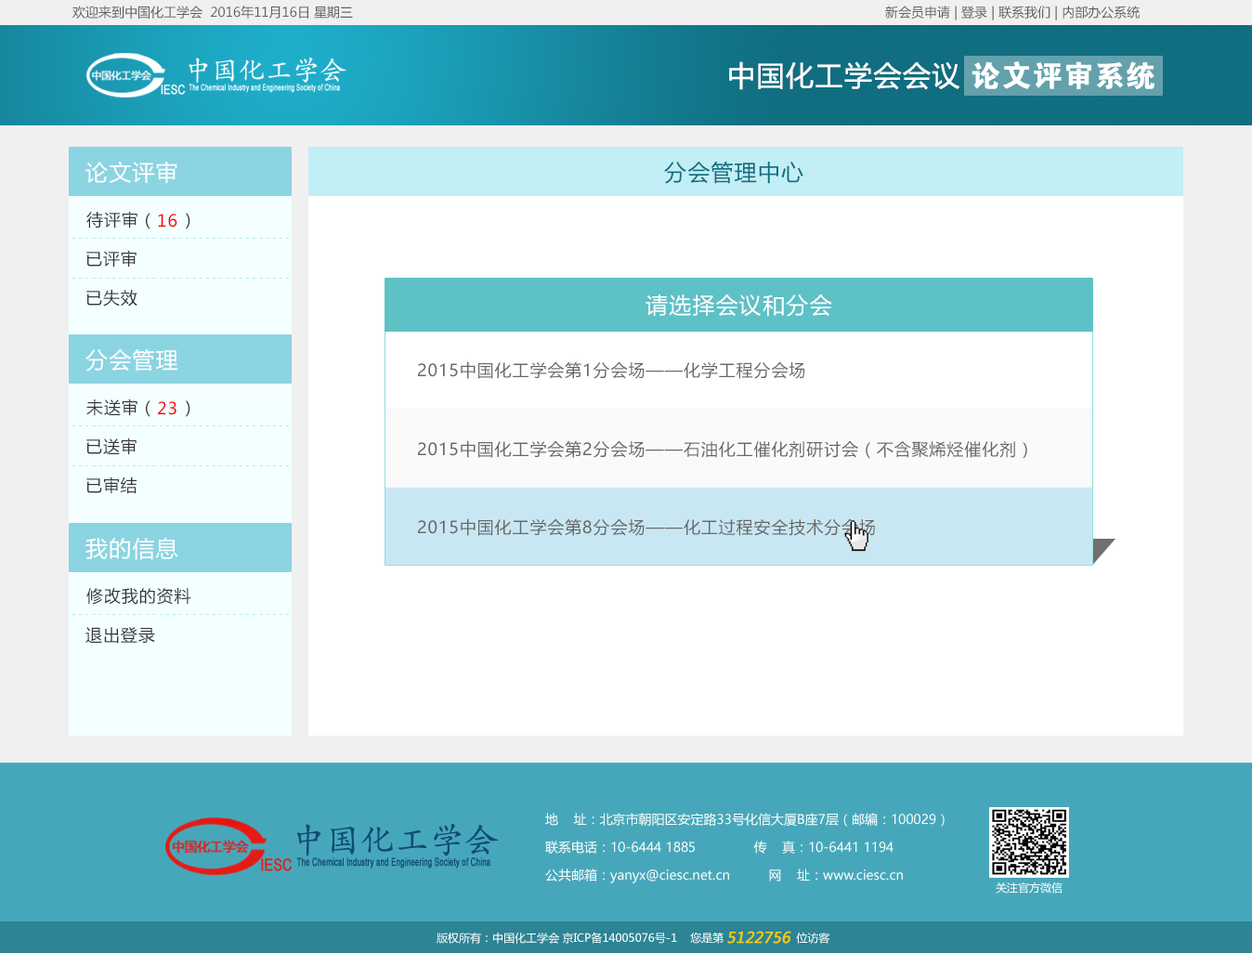
<style>
.page{position:relative;width:1252px;height:953px;background:#ffffff}
.page>*{position:absolute;margin:0}
.t1{font:13px "MicrosoftYaHei";color:#5d5e5e}
.t2{font:27.9px "MicrosoftYaHei";letter-spacing:0.05em;color:#ffffff}
.t3{font:29.6px "FZDHTJW--GB1-0";letter-spacing:0.05em;color:#ffffff}
.t4{font:22.3px "MicrosoftYaHei";letter-spacing:0.05em;color:#ffffff}
.t5{font:22.3px "MicrosoftYaHei";letter-spacing:0.05em;color:#116e80}
.t6{font:16.7px "MicrosoftYaHei";letter-spacing:0.05em;color:#363636}
.t7{font:16.7px "MicrosoftYaHei";letter-spacing:0.05em;color:#ff0000}
.t8{font:7.4px "SimSun";letter-spacing:0.4em;color:#b2e9f4}
.t9{font:16.7px "MicrosoftYaHei";letter-spacing:0.05em;color:#676767}
.t10{font:13px/27.9px "MicrosoftYaHei";color:#f4ffff}
.t11{font:11.1px "MicrosoftYaHei";color:#f4ffff}
.t12{font:14.9px "MicrosoftYaHei";color:#ffcc00;font-weight:bold;font-style:italic}
</style>
<div class="page">
<p class="t1" style="left:72px;top:6px;width:281px;height:13px">欢迎来到中国化工学会  2016年11月16日 星期三</p>
<p class="t1" style="left:885px;top:6px;width:254px;height:14px">新会员申请 | 登录 | 联系我们 | 内部办公系统</p>
<p class="t2" style="left:729px;top:61px;width:230px;height:29px">中国化工学会会议</p>
<p class="t3" style="left:971px;top:61px;width:183px;height:29px">论文评审系统</p>
<p class="t4" style="left:85px;top:161px;width:92px;height:23px">论文评审</p>
<p class="t5" style="left:664px;top:162px;width:139px;height:22px">分会管理中心</p>
<p class="t6" style="left:86px;top:211px;width:104px;height:18px">待评审（    ）</p>
<p class="t7" style="left:158px;top:214px;width:19px;height:13px">16</p>
<p class="t8" style="left:72px;top:238px;width:217px;height:1px">---------------------------------</p>
<p class="t6" style="left:86px;top:250px;width:50px;height:17px">已评审</p>
<p class="t8" style="left:72px;top:278px;width:217px;height:1px">---------------------------------</p>
<p class="t6" style="left:86px;top:290px;width:51px;height:16px">已失效</p>
<p class="t4" style="left:645px;top:294px;width:187px;height:23px">请选择会议和分会</p>
<p class="t4" style="left:85px;top:349px;width:93px;height:22px">分会管理</p>
<p class="t9" style="left:418px;top:361px;width:387px;height:18px">2015中国化工学会第1分会场——化学工程分会场</p>
<p class="t6" style="left:86px;top:398px;width:104px;height:19px">未送审（    ）</p>
<p class="t7" style="left:158px;top:401px;width:18px;height:14px">23</p>
<p class="t8" style="left:72px;top:425px;width:217px;height:1px">---------------------------------</p>
<p class="t6" style="left:86px;top:437px;width:50px;height:18px">已送审</p>
<p class="t9" style="left:418px;top:440px;width:609px;height:19px">2015中国化工学会第2分会场——石油化工催化剂研讨会（不含聚烯烃催化剂）</p>
<p class="t8" style="left:72px;top:465px;width:217px;height:1px">---------------------------------</p>
<p class="t6" style="left:86px;top:476px;width:51px;height:18px">已审结</p>
<p class="t9" style="left:418px;top:518px;width:457px;height:18px">2015中国化工学会第8分会场——化工过程安全技术分会场</p>
<p class="t4" style="left:85px;top:537px;width:93px;height:23px">我的信息</p>
<p class="t6" style="left:86px;top:588px;width:105px;height:16px">修改我的资料</p>
<p class="t8" style="left:72px;top:614px;width:217px;height:1px">---------------------------------</p>
<p class="t6" style="left:85px;top:627px;width:70px;height:16px">退出登录</p>
<p class="t10" style="left:545px;top:812px;width:399px;height:71px">地    址：北京市朝阳区安定路33号化信大厦B座7层（邮编：100029）<br>联系电话：10-6444 1885               传    真：10-6441 1194<br>公共邮箱：yanyx@ciesc.net.cn          网    址：www.ciesc.cn</p>
<p class="t11" style="left:995px;top:882px;width:67px;height:11px">关注官方微信</p>
<p class="t11" style="left:436px;top:931px;width:394px;height:12px">版权所有：中国化工学会 京ICP备14005076号-1    您是第                      位访客</p>
<p class="t12" style="left:727px;top:930px;width:64px;height:13px">5122756</p>
</div>
